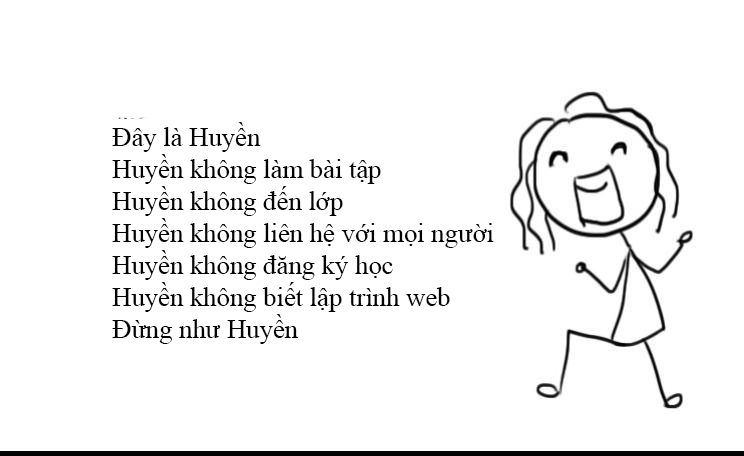
<style>
.page{position:relative;width:744px;height:456px;background:#ffffff}
.page>*{position:absolute;margin:0}
.t1{font:26.7px "TimesNewRomanPSMT";color:#000000}
</style>
<div class="page">
<p class="t1" style="left:112px;top:122px;width:382px;height:222px;text-align:right">Đây là Huyền<br>Huyền không làm bài tập<br>Huyền không đến lớp<br>Huyền không liên hệ với mọi người<br>Huyền không đăng ký học<br>Huyền không biết lập trình web<br>Đừng như Huyền</p>
</div>
